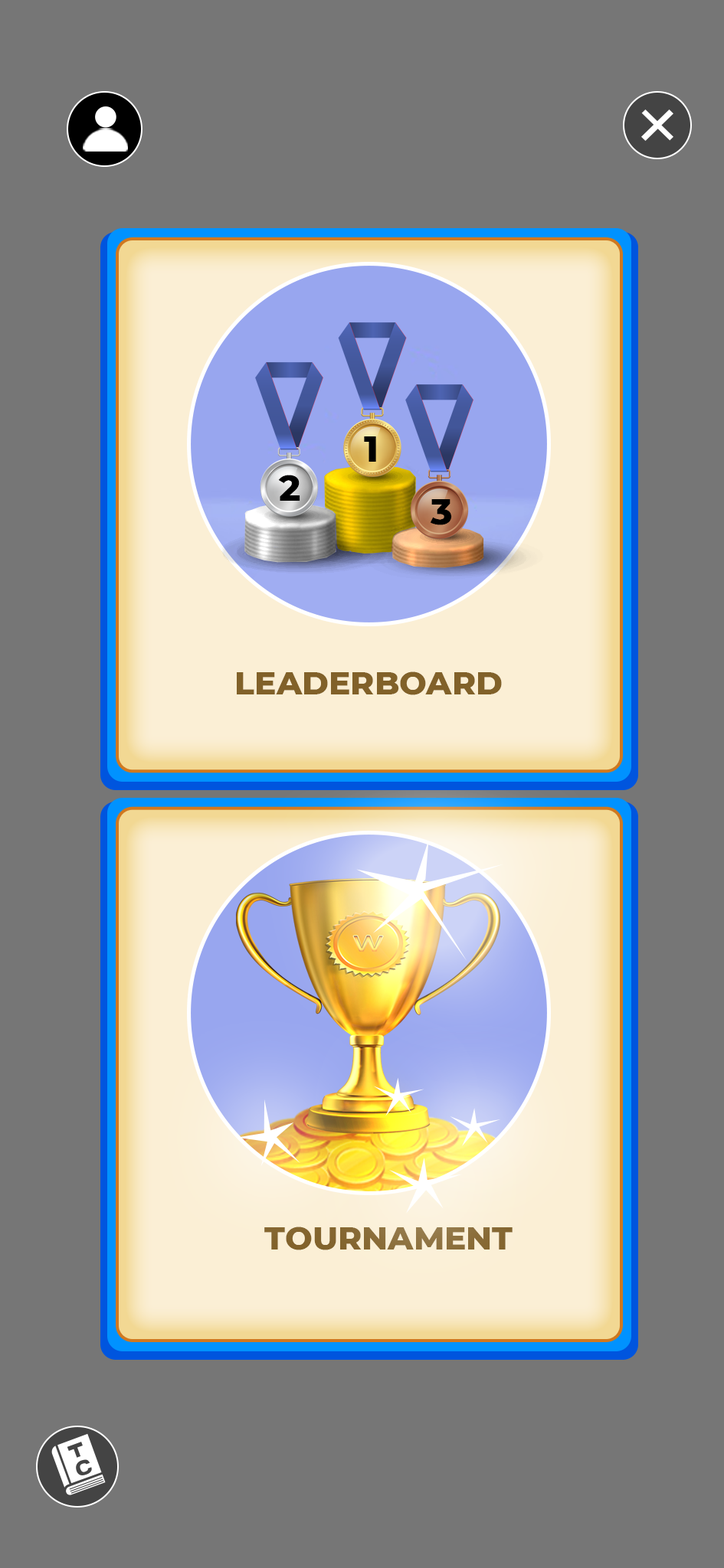
<style>
.page{position:relative;width:724px;height:1568px;background:#767676}
.page>*{position:absolute;margin:0}
.t1{font:36.2px "Montserrat-ExtraBold";color:#000000}
.t2{font:32.4px "Montserrat-ExtraBold";color:#816129}
</style>
<div class="page">
<p class="t1" style="left:364px;top:436px;width:12px;height:26px">1</p>
<p class="t1" style="left:278px;top:475px;width:22px;height:26px">2</p>
<p class="t1" style="left:430px;top:499px;width:22px;height:26px">3</p>
<p class="t2" style="left:237px;top:671px;width:264px;height:24px">LEADERBOARD</p>
<p class="t2" style="left:264px;top:1227px;width:248px;height:23px">TOURNAMENT</p>
</div>
